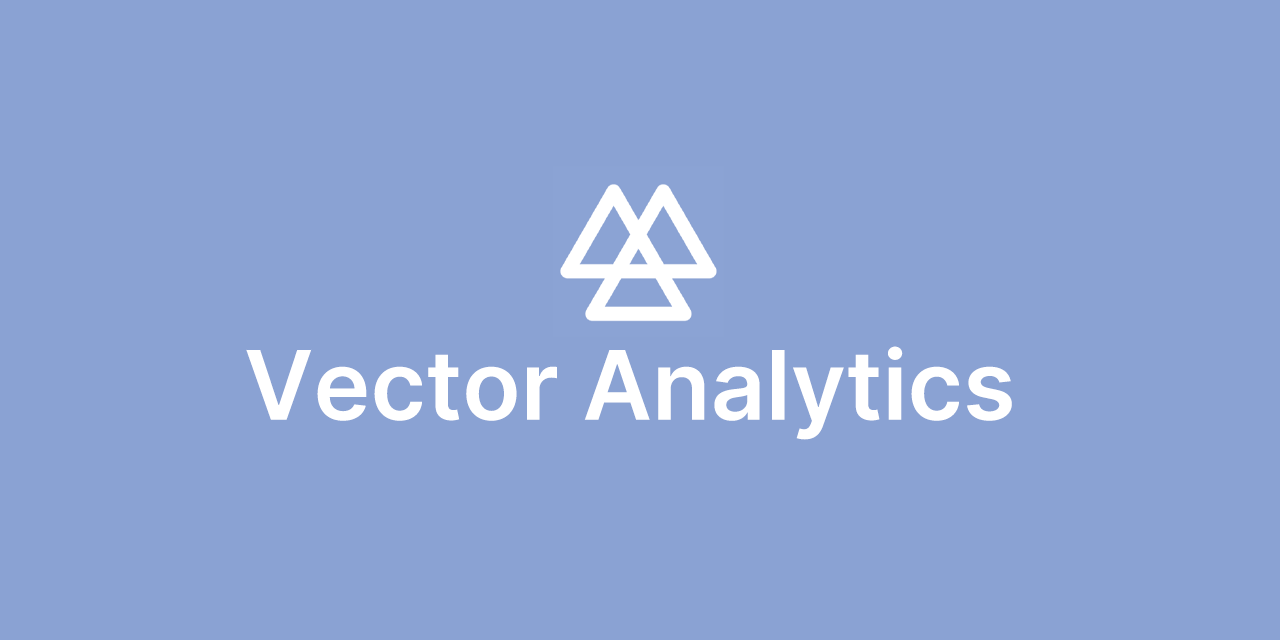
<style>
.page{position:relative;width:1280px;height:640px;background:#8aa2d3}
.page>*{position:absolute;margin:0}
.t1{font:96px "Inter-SemiBold";color:#ffffff}
</style>
<div class="page">
<p class="t1" style="left:246px;top:346px;width:766px;height:94px">Vector Analytics</p>
</div>
